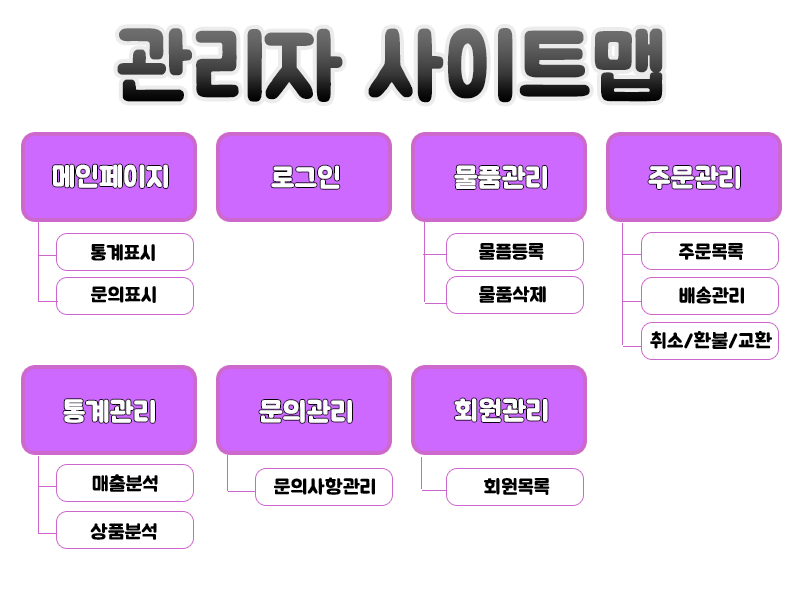
<style>
.page{position:relative;width:800px;height:600px;background:#ffffff}
.page>*{position:absolute;margin:0}
.t1{font:90px "BMJUA";font-weight:bold}
.t2{font:28px "BMJUA";color:#ffffff;font-weight:bold}
.t3{font:20px "BMJUA";color:#000000;font-weight:bold}
</style>
<div class="page">
<p class="t1" style="left:117px;top:28px;width:546px;height:75px">관리자 사이트맵</p>
<p class="t2" style="left:52px;top:164px;width:116px;height:24px">메인페이지</p>
<p class="t2" style="left:271px;top:165px;width:69px;height:24px">로그인</p>
<p class="t2" style="left:454px;top:165px;width:93px;height:24px">물품관리</p>
<p class="t2" style="left:648px;top:165px;width:92px;height:24px">주문관리</p>
<p class="t3" style="left:91px;top:244px;width:64px;height:17px">통계표시</p>
<p class="t3" style="left:479px;top:243px;width:65px;height:17px">물픔등록</p>
<p class="t3" style="left:679px;top:243px;width:64px;height:17px">주문목록</p>
<p class="t3" style="left:91px;top:286px;width:65px;height:17px">문의표시</p>
<p class="t3" style="left:479px;top:286px;width:67px;height:17px">물품삭제</p>
<p class="t3" style="left:679px;top:286px;width:65px;height:18px">배송관리</p>
<p class="t3" style="left:650px;top:331px;width:122px;height:18px">취소/환불/교환</p>
<p class="t2" style="left:63px;top:399px;width:92px;height:24px">통계관리</p>
<p class="t2" style="left:259px;top:399px;width:93px;height:24px">문의관리</p>
<p class="t2" style="left:454px;top:398px;width:94px;height:24px">회원관리</p>
<p class="t3" style="left:92px;top:474px;width:66px;height:18px">매출분석</p>
<p class="t3" style="left:274px;top:477px;width:101px;height:18px">문의사항관리</p>
<p class="t3" style="left:484px;top:478px;width:66px;height:17px">회원목록</p>
<p class="t3" style="left:90px;top:523px;width:67px;height:17px">상품분석</p>
</div>
